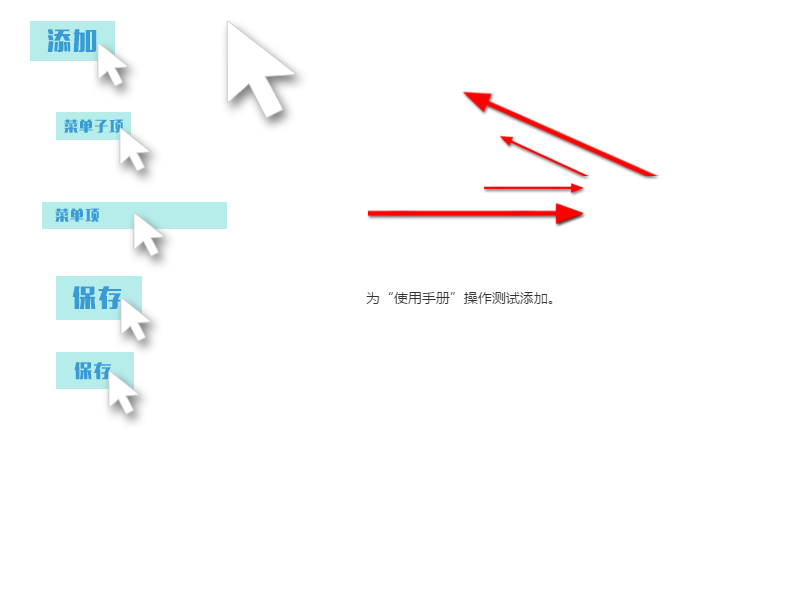
<style>
.page{position:relative;width:800px;height:600px;background:#ffffff}
.page>*{position:absolute;margin:0}
.t1{font:24px "MFLiHei_Noncommercial-Regular";letter-spacing:0.08em;color:#389bd3}
.t2{font:14px "MFLiHei_Noncommercial-Regular";letter-spacing:0.08em;color:#389bd3}
.t3{font:18px "MFLiHei_Noncommercial-Regular";letter-spacing:0.08em;color:#389bd3}
</style>
<div class="page">
<p class="t1" style="left:47px;top:29px;width:50px;height:23px">添加</p>
<p class="t2" style="left:64px;top:119px;width:59px;height:14px">菜单子项</p>
<p class="t2" style="left:55px;top:208px;width:44px;height:14px">菜单项</p>
<p class="t1" style="left:72px;top:286px;width:50px;height:23px">保存</p>
<p class="t3" style="left:74px;top:362px;width:37px;height:18px">保存</p>
</div>
